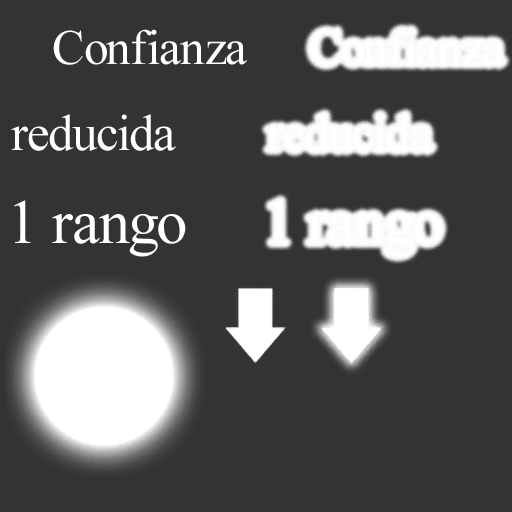
<style>
.page{position:relative;width:512px;height:512px;background:#333333}
.page>*{position:absolute;margin:0}
.t1{font:49.3px "TimesNewRomanPSMT";letter-spacing:-0.02em;color:#ffffff}
.t2{font:50.9px "TimesNewRomanPSMT";letter-spacing:-0.02em;color:#ffffff}
.t3{font:63px "TimesNewRomanPSMT";letter-spacing:-0.02em;color:#ffffff}
</style>
<div class="page">
<p class="t1" style="left:53px;top:29px;width:194px;height:36px">Confianza</p>
<p class="t1" style="left:310px;top:29px;width:194px;height:36px">Confianza</p>
<p class="t2" style="left:11px;top:114px;width:165px;height:37px">reducida</p>
<p class="t2" style="left:267px;top:114px;width:166px;height:37px">reducida</p>
<p class="t3" style="left:14px;top:200px;width:172px;height:57px">1 rango</p>
<p class="t3" style="left:270px;top:200px;width:172px;height:57px">1 rango</p>
</div>
